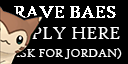
<style>
.page{position:relative;width:128px;height:64px;background:#000000}
.page>*{position:absolute;margin:0}
.t1{font:18px "HighTowerText-Reg";color:#ffffff}
.t2{font:12px "HighTowerText-Reg";color:#ffffff}
</style>
<div class="page">
<p class="t1" style="left:7px;top:27px;width:113px;height:12px">APPLY HERE</p>
<p class="t2" style="left:6px;top:48px;width:116px;height:11px">(ASK FOR JORDAN)</p>
</div>
